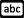
<style>
.page{position:relative;width:24px;height:18px;background:#ffffff}
.page>*{position:absolute;margin:0}
.t1{font:11.7px "Calibri";color:#000000}
</style>
<div class="page">
<p class="t1" style="left:4px;top:4px;width:17px;height:9px">abc</p>
</div>
